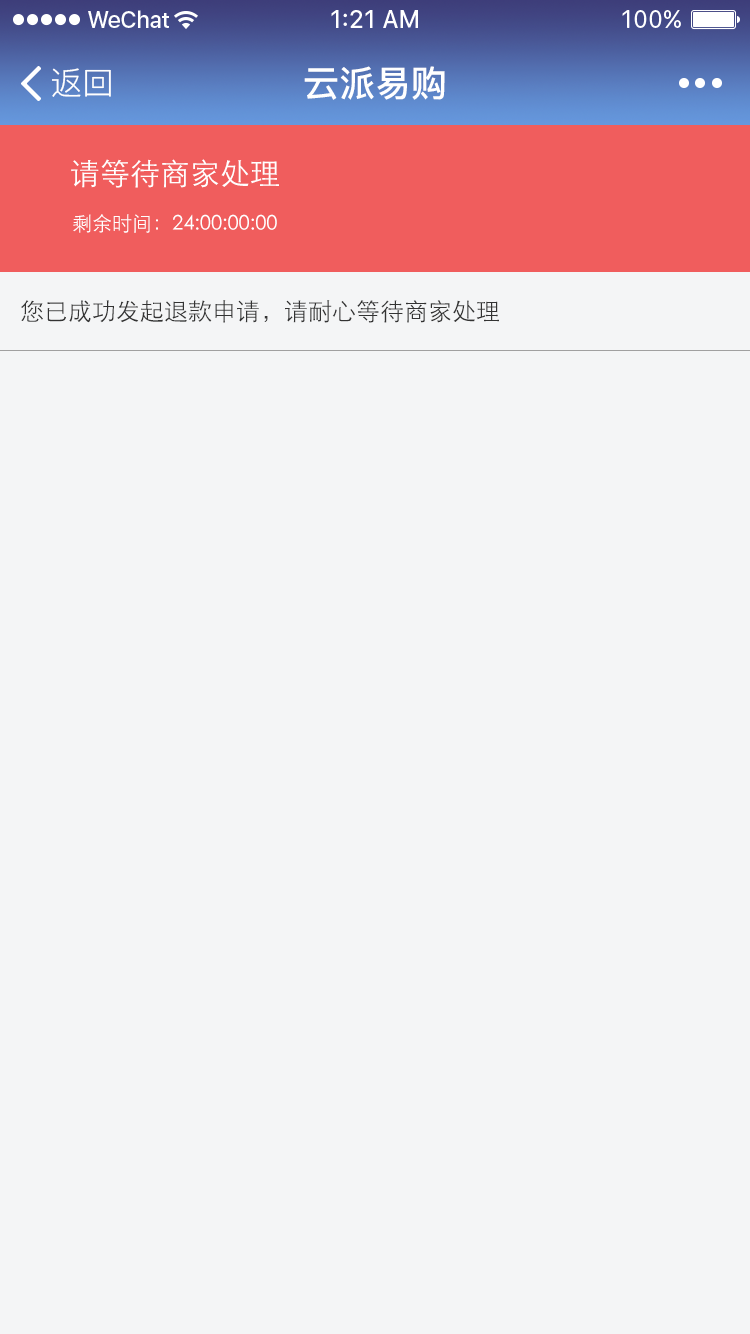
<style>
.page{position:relative;width:750px;height:1334px;background:#f4f5f6}
.page>*{position:absolute;margin:0}
.t1{font:32px "PingFang-SC-Regular";color:#ffffff}
.t2{font:36px "PingFang-SC-Bold";color:#ffffff}
.t3{font:30px "STXihei";color:#ffffff}
.t4{font:20px "STXihei";color:#ffffff}
.t5{font:24px "STXihei";color:#333333}
</style>
<div class="page">
<p class="t1" style="left:52px;top:68px;width:59px;height:29px">返回</p>
<p class="t2" style="left:304px;top:66px;width:141px;height:34px">云派易购</p>
<p class="t3" style="left:71px;top:159px;width:208px;height:29px">请等待商家处理</p>
<p class="t4" style="left:73px;top:214px;width:204px;height:19px">剩余时间：24:00:00:00</p>
<p class="t5" style="left:21px;top:300px;width:478px;height:23px">您已成功发起退款申请，请耐心等待商家处理</p>
</div>
